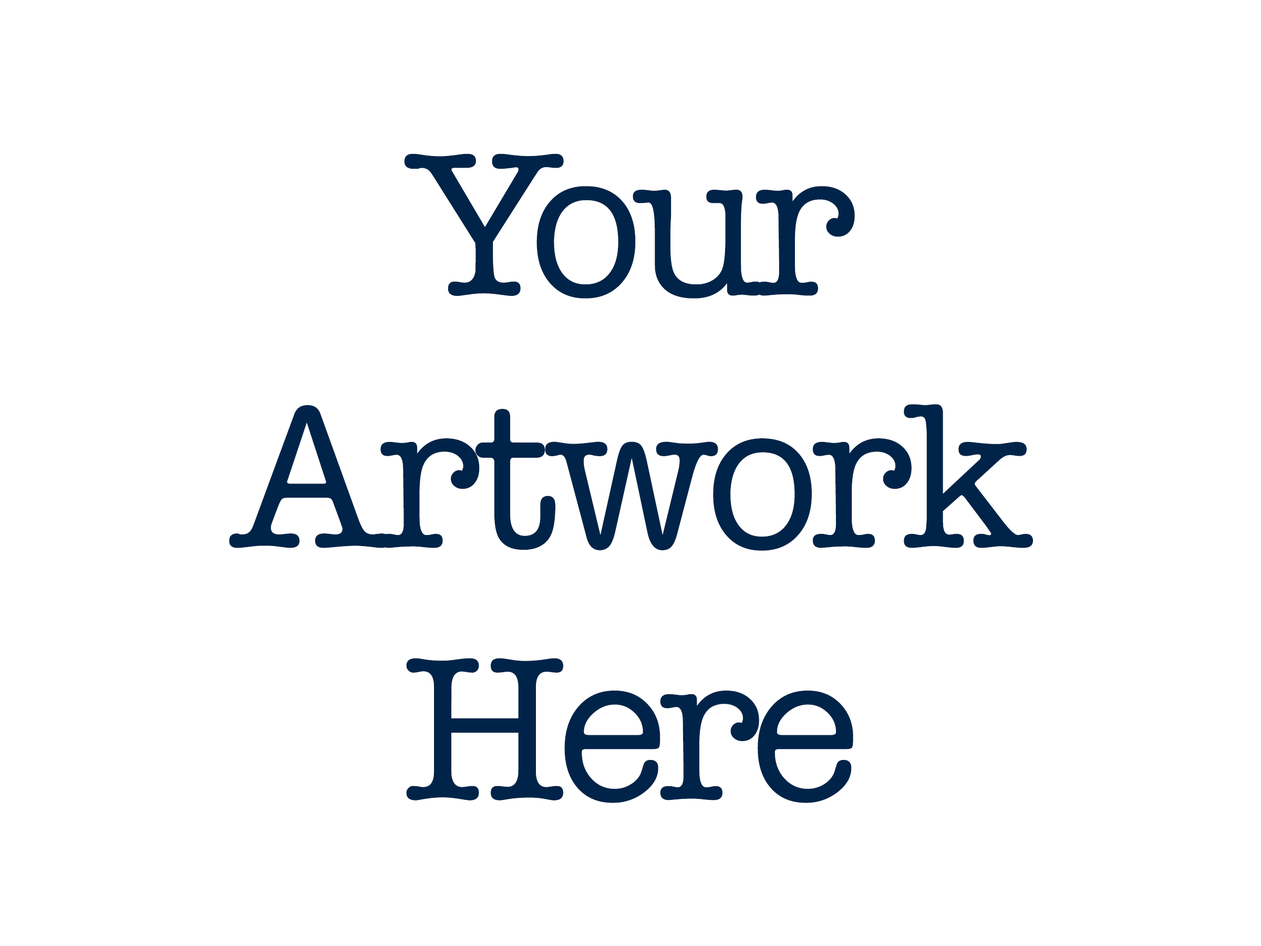
<style>
.page{position:relative;width:1261px;height:946px;background:#ffffff}
.page>*{position:absolute;margin:0}
.t1{font:210.1px "AmericanTypewriter";letter-spacing:-0.05em;color:#002449}
</style>
<div class="page">
<p class="t1" style="left:229px;top:153px;width:804px;height:650px;text-align:center">Your<br>Artwork<br>Here</p>
</div>
